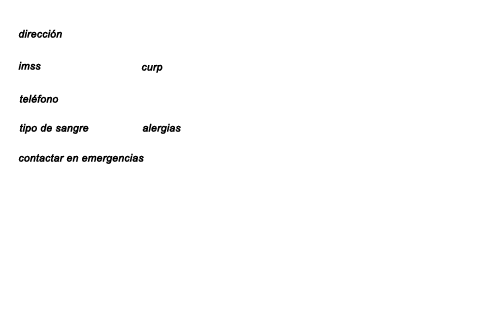
<style>
.page{position:relative;width:490px;height:311px;background:#ffffff}
.page>*{position:absolute;margin:0}
.t1{font:10.3px "Arial-ItalicMT";color:#000000;font-weight:bold}
</style>
<div class="page">
<p class="t1" style="left:18px;top:29px;width:44px;height:9px">dirección</p>
<p class="t1" style="left:18px;top:61px;width:23px;height:9px">imss</p>
<p class="t1" style="left:141px;top:64px;width:22px;height:9px">curp</p>
<p class="t1" style="left:19px;top:94px;width:40px;height:9px">teléfono</p>
<p class="t1" style="left:19px;top:123px;width:70px;height:11px">tipo de sangre</p>
<p class="t1" style="left:142px;top:123px;width:39px;height:11px">alergias</p>
<p class="t1" style="left:18px;top:153px;width:126px;height:11px">contactar en emergencias</p>
</div>
